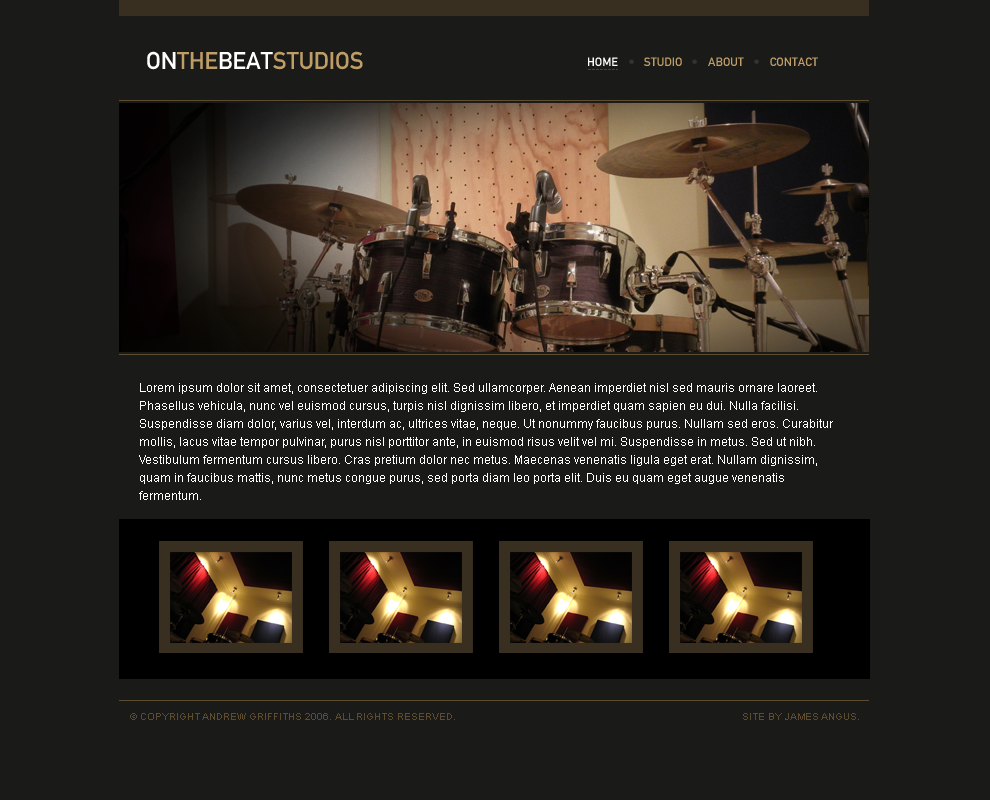
<style>
.page{position:relative;width:990px;height:800px;background:#1a1a19}
.page>*{position:absolute;margin:0}
.t1{font:24px "DIN-1451-Mittelschrift-Regular";color:#bf9d66}
.t2{font:24px "DIN-1451-Mittelschrift-DB-Regular";color:#ffffff}
.t3{font:24px "DIN-1451-Mittelschrift-DB-Regular";color:#bf9d66}
.t4{font:12px "DIN-1451-Mittelschrift-Regular";color:#bf9d66}
.t5{font:12px "DIN-1451-Mittelschrift-Regular";color:#ffffff}
.t6{font:12px/18px "ArialMT";color:#ffffff}
.t7{font:10px "ArialMT";color:#5d4c30}
</style>
<div class="page">
<p class="t1" style="left:147px;top:51px;width:216px;height:19px"><span class="t2">ON</span><span class="t3">THE</span><span class="t2">BEAT</span>STUDIOS</p>
<p class="t4" style="left:588px;top:57px;width:230px;height:9px"><span class="t5">HOME</span>         STUDIO         ABOUT         CONTACT</p>
<p class="t6" style="left:139px;top:383px;width:694px;height:117px">Lorem ipsum dolor sit amet, consectetuer adipiscing elit. Sed ullamcorper. Aenean imperdiet nisl sed mauris ornare laoreet. Phasellus vehicula, nunc vel euismod cursus, turpis nisl dignissim libero, et imperdiet quam sapien eu dui. Nulla facilisi. Suspendisse diam dolor, varius vel, interdum ac, ultrices vitae, neque. Ut nonummy faucibus purus. Nullam sed eros. Curabitur mollis, lacus vitae tempor pulvinar, purus nisl porttitor ante, in euismod risus velit vel mi. Suspendisse in metus. Sed ut nibh. Vestibulum fermentum cursus libero. Cras pretium dolor nec metus. Maecenas venenatis ligula eget erat. Nullam dignissim, quam in faucibus mattis, nunc metus congue purus, sed porta diam leo porta elit. Duis eu quam eget augue venenatis fermentum.</p>
<p class="t7" style="left:130px;top:713px;width:325px;height:7px">© COPYRIGHT ANDREW GRIFFITHS 2006. ALL RIGHTS RESERVED.</p>
<p class="t7" style="left:743px;top:713px;width:116px;height:7px">SITE BY JAMES ANGUS.</p>
</div>
